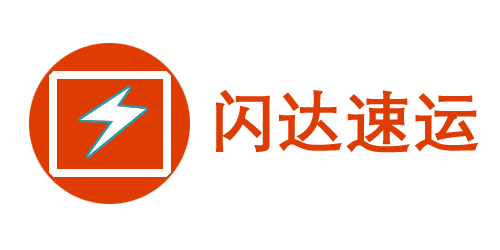
<style>
.page{position:relative;width:500px;height:250px;background:#ffffff}
.page>*{position:absolute;margin:0}
.t1{font:68px "DengXian-Bold";color:#de3c03}
</style>
<div class="page">
<p class="t1" style="left:215px;top:90px;width:264px;height:63px">闪达速运</p>
</div>
